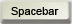
<style>
.page{position:relative;width:72px;height:24px}
.page>*{position:absolute;margin:0}
.t1{font:11px "ArialMT";color:#000000}
</style>
<div class="page">
<p class="t1" style="left:11px;top:7px;width:48px;height:10px">Spacebar</p>
</div>
